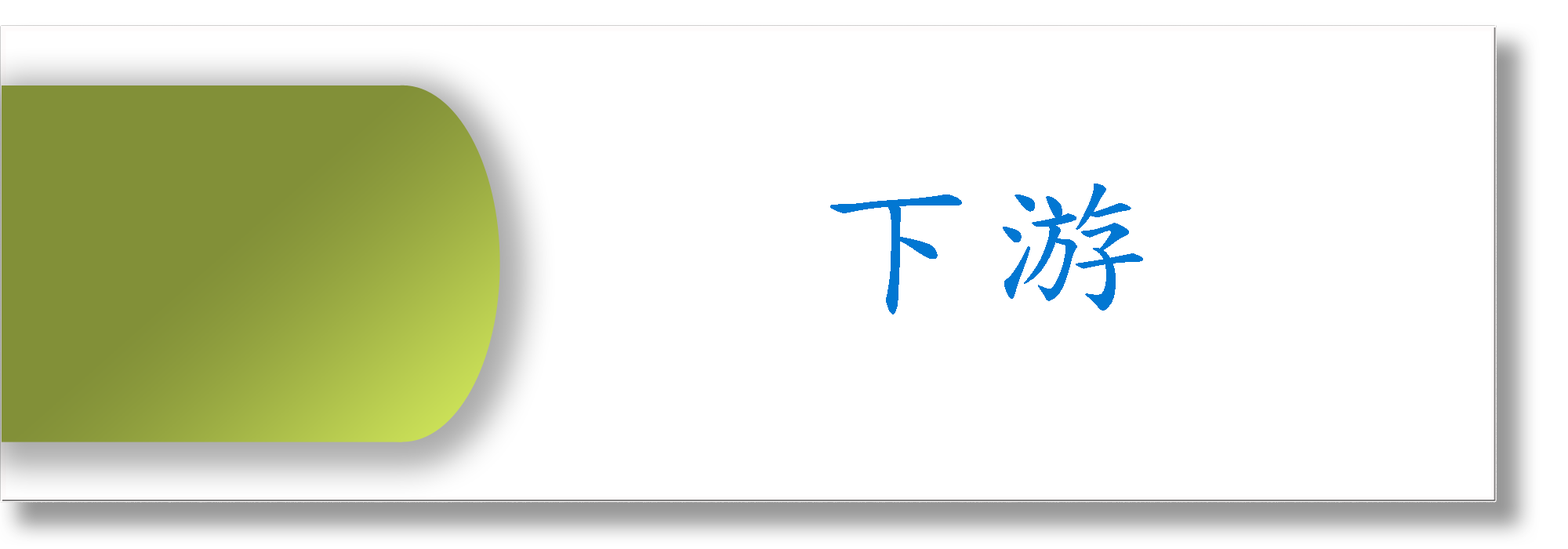
<style>
.page{position:relative;width:1568px;height:549px;background:#ffffff}
.page>*{position:absolute;margin:0}
.t1{font:156.8px "DFKaiShu-SB-Estd-BF";letter-spacing:0.08em;color:#0277d2}
</style>
<div class="page">
<p class="t1" style="left:830px;top:183px;width:313px;height:131px">下游</p>
</div>
